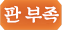
<style>
.page{position:relative;width:62px;height:30px}
.page>*{position:absolute;margin:0}
.t1{font:18.7px "SDKukdetopokki-aLt";letter-spacing:-0.02em;color:#ffffff}
</style>
<div class="page">
<p class="t1" style="left:4px;top:5px;width:55px;height:18px">판 부족</p>
</div>
